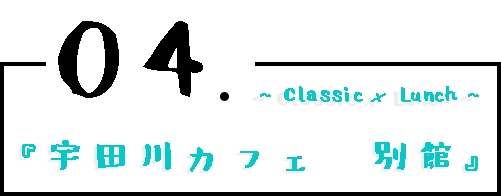
<style>
.page{position:relative;width:501px;height:196px;background:#ffffff}
.page>*{position:absolute;margin:0}
.t1{font:140px "001Shirokuma-Regular";letter-spacing:-0.36em;color:#000000}
.t2{font:135px "001Shirokuma-Regular";color:#000000}
.t3{font:24px "001Shirokuma-Regular";letter-spacing:-0.56em;color:#05c8c8;font-weight:bold}
.t4{font:24px "SnellRoundhand";letter-spacing:-0.56em;color:#05c8c8;font-weight:bold}
.t5{font:36px "001Shirokuma-Regular";letter-spacing:0.26em;color:#05c8c8;font-weight:bold}
</style>
<div class="page">
<p class="t1" style="left:58px;top:21px;width:61px;height:77px">0</p>
<p class="t2" style="left:143px;top:21px;width:60px;height:76px">4</p>
<p class="t3" style="left:260px;top:86px;width:219px;height:16px">~ Classic <span class="t4">×</span>  Lunch ~</p>
<p class="t5" style="left:22px;top:140px;width:456px;height:32px">『宇田川カフェ 別館』</p>
</div>
